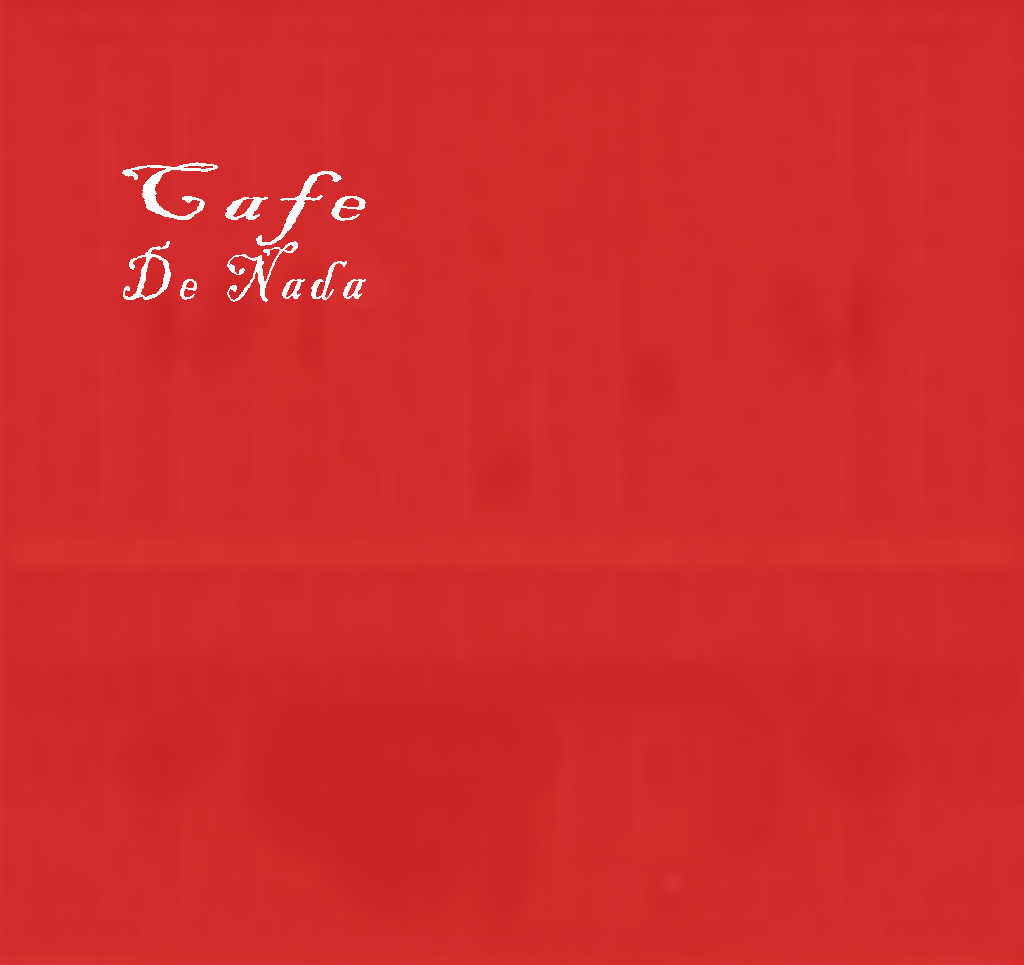
<style>
.page{position:relative;width:1024px;height:965px}
.page>*{position:absolute;margin:0}
.t1{font:85.6px "BlackadderITC-Regular";letter-spacing:0.1em;color:#ffffff;scale:1.45 1}
.t2{font:71.8px "BlackadderITC-Regular";letter-spacing:0.1em;color:#ffffff;scale:0.88 1}
</style>
<div class="page">
<p class="t1" style="left:122px;top:162px;width:244px;height:84px">Cafe</p>
<p class="t2" style="left:123px;top:241px;width:243px;height:61px">De Nada</p>
</div>
